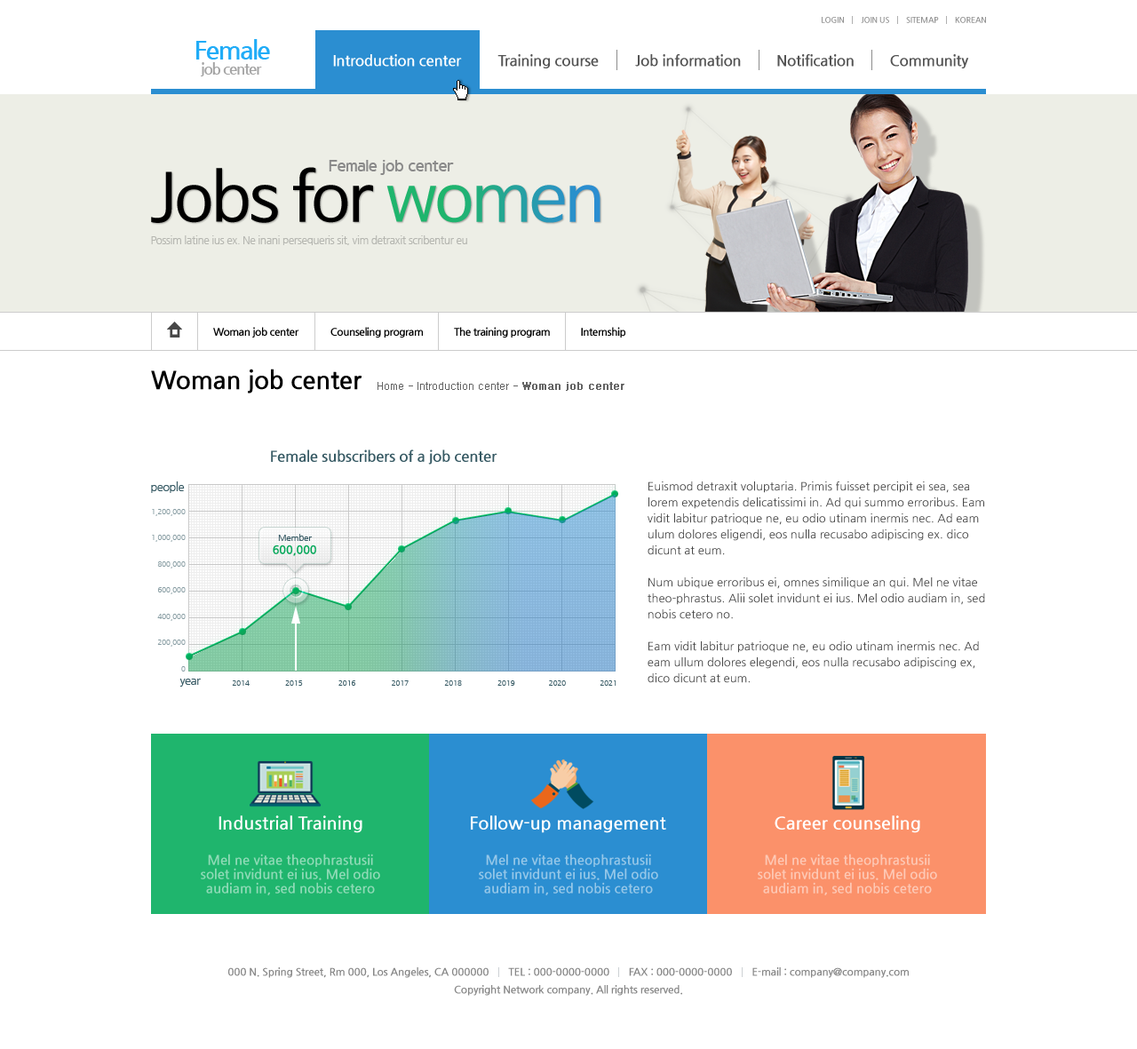
<style>
.page{position:relative;width:1137px;height:1049px;background:#ffffff}
.page>*{position:absolute;margin:0}
.t1{font:8px "NanumGothicBold";letter-spacing:-0.02em;color:#939393}
.t2{font:15.1px "NanumGothicBold";letter-spacing:-0.02em;color:#545454}
.t3{font:15.1px "NanumGothicBold";letter-spacing:-0.02em;color:#ffffff}
.t4{font:10.7px "NanumGothicBold";letter-spacing:-0.04em;color:#000000}
.t5{font:24.9px "NanumGothicBold";letter-spacing:-0.01em;color:#000000}
.t6{font:10.7px "Dotum";color:#646464}
.t7{font:10.7px "Dotum";color:#646464;font-weight:bold}
.t8{font:15.1px "NanumGothicBold";letter-spacing:-0.02em;color:#375a64}
.t9{font:11.5px/16px "NanumGothic";color:#464646}
.t10{font:17.8px "NanumGothicBold";color:#ffffff}
.t11{font:13.3px/14.2px "NanumGothicBold";color:#8fdab6}
.t12{font:13.3px/14.2px "NanumGothicBold";color:#95c7e8}
.t13{font:13.3px/14.2px "NanumGothicBold";color:#fdc8b5}
.t14{font:10.7px/17.8px "NanumGothicBold";letter-spacing:-0.02em;color:#878787}
</style>
<div class="page">
<p class="t1" style="left:822px;top:17px;width:164px;height:6px">LOGIN        JOIN US        SITEMAP        KOREAN</p>
<p class="t2" style="left:333px;top:54px;width:636px;height:14px"><span class="t3">Introduction center         </span>Training course         Job information         Notification         Community</p>
<p class="t4" style="left:213px;top:327px;width:412px;height:10px">Woman job center             Counseling program            The training program            Internship</p>
<p class="t5" style="left:151px;top:369px;width:210px;height:24px">Woman job center</p>
<p class="t6" style="left:377px;top:382px;width:247px;height:9px">Home - Introduction center - <span class="t7">Woman job center</span></p>
<p class="t8" style="left:271px;top:449px;width:226px;height:16px">Female subscribers of a job center</p>
<p class="t9" style="left:647px;top:481px;width:338px;height:202px">Euismod detraxit voluptaria. Primis fuisset percipit ei sea, sea lorem expetendis delicatissimi in. Ad qui summo erroribus. Eam vidit labitur patrioque ne, eu odio utinam inermis nec. Ad eam ulum dolores eligendi, eos nulla recusabo adipiscing ex. dico dicunt at eum.<br><br>Num ubique erroribus ei, omnes similique an qui. Mel ne vitae theo-phrastus. Alii solet invidunt ei ius. Mel odio audiam in, sed nobis cetero no.<br><br>Eam vidit labitur patrioque ne, eu odio utinam inermis nec. Ad eam ullum dolores elegendi, eos nulla recusabo adipiscing ex, dico dicunt at eum.</p>
<p class="t10" style="left:218px;top:815px;width:144px;height:18px">Industrial Training</p>
<p class="t10" style="left:471px;top:815px;width:195px;height:18px">Follow-up management</p>
<p class="t10" style="left:774px;top:815px;width:146px;height:18px">Career counseling</p>
<p class="t11" style="left:201px;top:854px;width:179px;height:41px;text-align:center">Mel ne vitae theophrastusii<br>solet invidunt ei ius. Mel odio<br>audiam in, sed nobis cetero</p>
<p class="t12" style="left:479px;top:854px;width:179px;height:41px;text-align:center">Mel ne vitae theophrastusii<br>solet invidunt ei ius. Mel odio<br>audiam in, sed nobis cetero</p>
<p class="t13" style="left:758px;top:854px;width:179px;height:41px;text-align:center">Mel ne vitae theophrastusii<br>solet invidunt ei ius. Mel odio<br>audiam in, sed nobis cetero</p>
<p class="t14" style="left:228px;top:967px;width:681px;height:29px;text-align:center">000 N. Spring Street, Rm 000, Los Angeles, CA 000000       TEL : 000-0000-0000       FAX : 000-0000-0000       E-mail : company@company.com<br>Copyright Network company. All rights reserved.</p>
</div>
